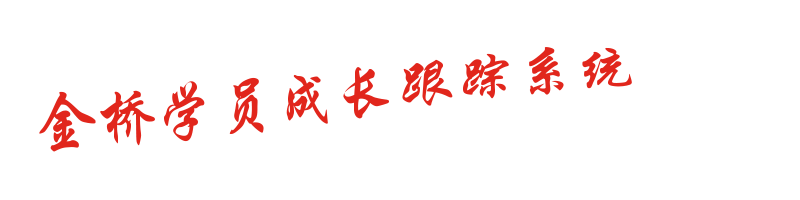
<style>
.page{position:relative;width:800px;height:200px;background:#ffffff}
.page>*{position:absolute;margin:0}
.t1{font:60px "STXingkai";color:#e1261c}
</style>
<div class="page">
<p class="t1" style="left:39px;top:47px;width:593px;height:105px">金桥学员成长跟踪系统</p>
</div>
